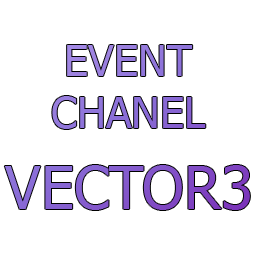
<style>
.page{position:relative;width:256px;height:256px;background:#ffffff}
.page>*{position:absolute;margin:0}
.t1{font:43px "Tahoma";color:#9075da}
.t2{font:59px "Tahoma";color:#8246cc}
</style>
<div class="page">
<p class="t1" style="left:52px;top:45px;width:154px;height:84px;text-align:center">EVENT<br>CHANEL</p>
<p class="t2" style="left:4px;top:165px;width:246px;height:45px">VECTOR3</p>
</div>
